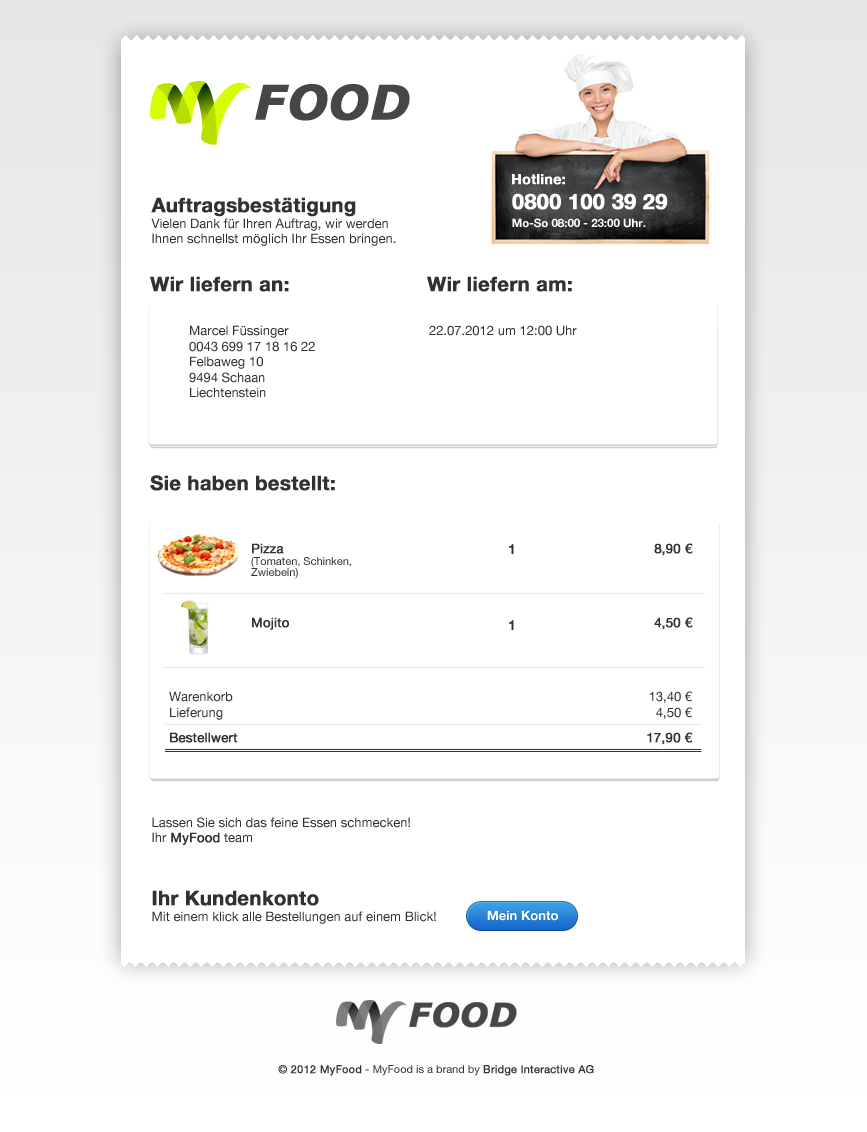
<style>
.page{position:relative;width:867px;height:1132px;background:#ffffff}
.page>*{position:absolute;margin:0}
.t1{font:46.9px "Verdana-BoldItalic";letter-spacing:0.01em;color:#464646;font-weight:bold}
.t2{font:14.1px "HelveticaNeue-Bold";color:#ffffff;font-weight:bold}
.t3{font:13px/15.6px "HelveticaNeue-Roman";color:#313131}
.t4{font:20px/15.6px "HelveticaNeue-Bold";color:#313131;font-weight:bold}
.t5{font:11.4px/18px "HelveticaNeue-Bold";color:#ffffff}
.t6{font:21.2px/25.5px "HelveticaNeue-Bold";color:#ffffff;font-weight:bold}
.t7{font:20px "HelveticaNeue-Bold";color:#313131;font-weight:bold}
.t8{font:13px "HelveticaNeue-Roman";color:#313131}
.t9{font:11px/11.6px "HelveticaNeue-Roman";color:#313131}
.t10{font:13px/11.6px "HelveticaNeue";color:#313131;font-weight:bold}
.t11{font:14px "HelveticaNeue-Bold";color:#313131}
.t12{font:13px "HelveticaNeue";color:#313131;font-weight:bold}
.t13{font:13px/25px "HelveticaNeue";color:#313131;font-weight:bold}
.t14{font:13px/15.6px "HelveticaNeue";color:#313131;font-weight:bold}
.t15{font:13px "HelveticaNeue-Bold";color:#ffffff}
.t16{font:11px "HelveticaNeue-Roman";color:#313131}
.t17{font:11px "HelveticaNeue";color:#313131;font-weight:bold}
</style>
<div class="page">
<p class="t1" style="left:255px;top:84px;width:155px;height:37px">FOOD</p>
<p class="t2" style="left:512px;top:174px;width:53px;height:11px">Hotline:</p>
<p class="t3" style="left:151px;top:197px;width:245px;height:49px"><span class="t4">Auftragsbestätigung<br></span>Vielen Dank für Ihren Auftrag, wir werden <br>Ihnen schnellst möglich Ihr Essen bringen.</p>
<p class="t5" style="left:512px;top:193px;width:156px;height:35px"><span class="t6">0800 100 39 29<br></span>Mo-So 08:00 - 23:00 Uhr.</p>
<p class="t7" style="left:150px;top:276px;width:139px;height:16px">Wir liefern an:</p>
<p class="t7" style="left:427px;top:276px;width:145px;height:16px">Wir liefern am:</p>
<p class="t8" style="left:189px;top:325px;width:126px;height:73px">Marcel Füssinger<br>0043 699 17 18 16 22<br>Felbaweg 10<br>9494 Schaan<br>Liechtenstein</p>
<p class="t8" style="left:429px;top:325px;width:148px;height:11px">22.07.2012 um 12:00 Uhr</p>
<p class="t7" style="left:150px;top:475px;width:185px;height:16px">Sie haben bestellt:</p>
<p class="t9" style="left:251px;top:543px;width:100px;height:36px"><span class="t10">Pizza<br></span>(Tomaten, Schinken,<br>Zwiebeln)</p>
<p class="t11" style="left:509px;top:544px;width:5px;height:10px">1</p>
<p class="t12" style="left:654px;top:543px;width:39px;height:13px">8,90 €</p>
<p class="t12" style="left:252px;top:617px;width:37px;height:13px">Mojito</p>
<p class="t12" style="left:654px;top:617px;width:39px;height:13px">4,50 €</p>
<p class="t11" style="left:509px;top:620px;width:5px;height:10px">1</p>
<p class="t8" style="left:169px;top:691px;width:69px;height:52px">Warenkorb<br>Lieferung<br><span class="t13">Bestellwert</span></p>
<p class="t8" style="left:647px;top:691px;width:46px;height:54px;text-align:right">13,40 €<br>4,50 €<br><span class="t13">17,90 €</span></p>
<p class="t3" style="left:152px;top:817px;width:258px;height:28px">Lassen Sie sich das feine Essen schmecken!<br>Ihr<span class="t14"> MyFood</span> team</p>
<p class="t3" style="left:152px;top:890px;width:284px;height:34px"><span class="t4">Ihr Kundenkonto<br></span>Mit einem klick alle Bestellungen auf einem Blick!</p>
<p class="t15" style="left:487px;top:910px;width:71px;height:11px">Mein Konto</p>
<p class="t16" style="left:278px;top:1065px;width:316px;height:11px"><span class="t17">© 2012 MyFood</span> - MyFood is a brand by <span class="t17">Bridge Interactive AG</span></p>
</div>
